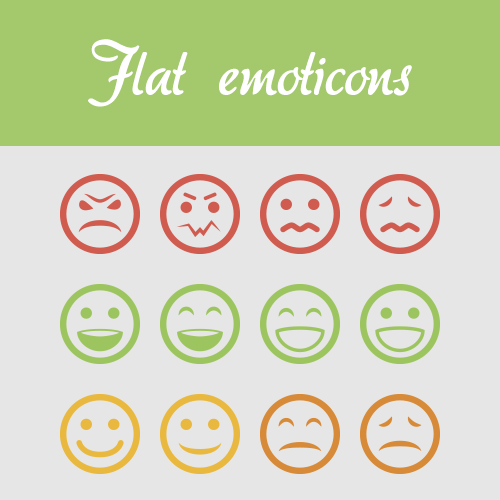
<style>
.page{position:relative;width:500px;height:500px;background:#e6e6e6}
.page>*{position:absolute;margin:0}
.t1{font:66px "akaDora";color:#ffffff}
</style>
<div class="page">
<p class="t1" style="left:88px;top:39px;width:324px;height:68px">Flat emoticons</p>
</div>
